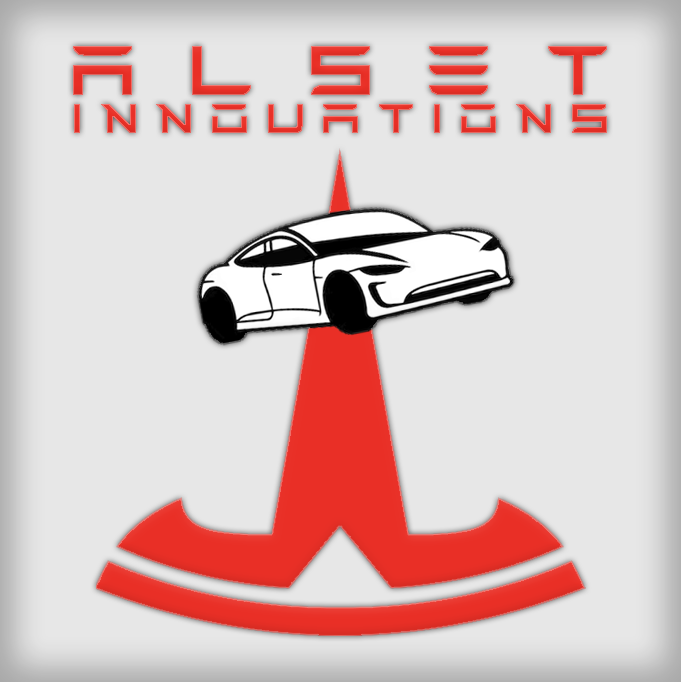
<style>
.page{position:relative;width:681px;height:682px;background:#e7e7e7}
.page>*{position:absolute;margin:0}
.t1{font:79.4px "TESLA";letter-spacing:0.62em;color:#e92f26}
.t2{font:46.3px "TESLA";letter-spacing:0.325em;color:#e92f26}
</style>
<div class="page">
<p class="t1" style="left:73px;top:46px;width:534px;height:49px">ALSET</p>
<p class="t2" style="left:74px;top:104px;width:533px;height:29px">INNOVATIONS</p>
</div>
